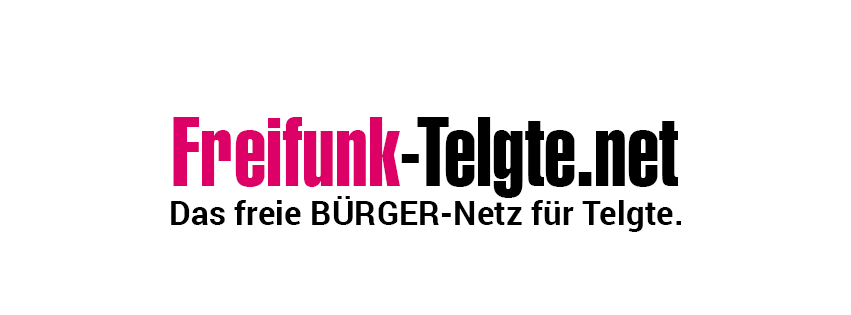
<style>
.page{position:relative;width:851px;height:315px;background:#ffffff}
.page>*{position:absolute;margin:0}
.t1{font:95.8px "Swiss911BT-ExtraCompressed";color:#000000}
.t2{font:95.8px "Swiss911BT-ExtraCompressed";color:#dc0067}
.t3{font:33.3px "Roboto-Bold";color:#000000}
</style>
<div class="page">
<p class="t1" style="left:173px;top:117px;width:505px;height:81px"><span class="t2">Freifunk</span>-Telgte.net</p>
<p class="t3" style="left:171px;top:196px;width:510px;height:36px">Das freie BÜRGER-Netz für Telgte.</p>
</div>
